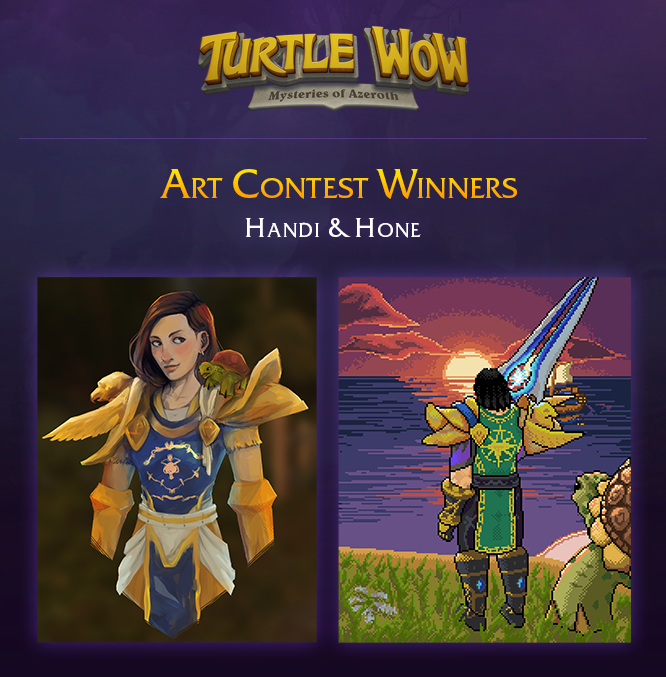
<style>
.page{position:relative;width:666px;height:677px}
.page>*{position:absolute;margin:0}
.t1{font:40.8px "FrizQuadrataC";letter-spacing:0.01em;font-variant:small-caps}
.t2{font:27px "FrizQuadrataC";letter-spacing:0.075em;color:#ffffff;font-variant:small-caps}
</style>
<div class="page">
<p class="t1" style="left:160px;top:169px;width:357px;height:30px">Art Contest Winners</p>
<p class="t2" style="left:245px;top:218px;width:176px;height:20px">Handi &amp; Hone</p>
</div>
